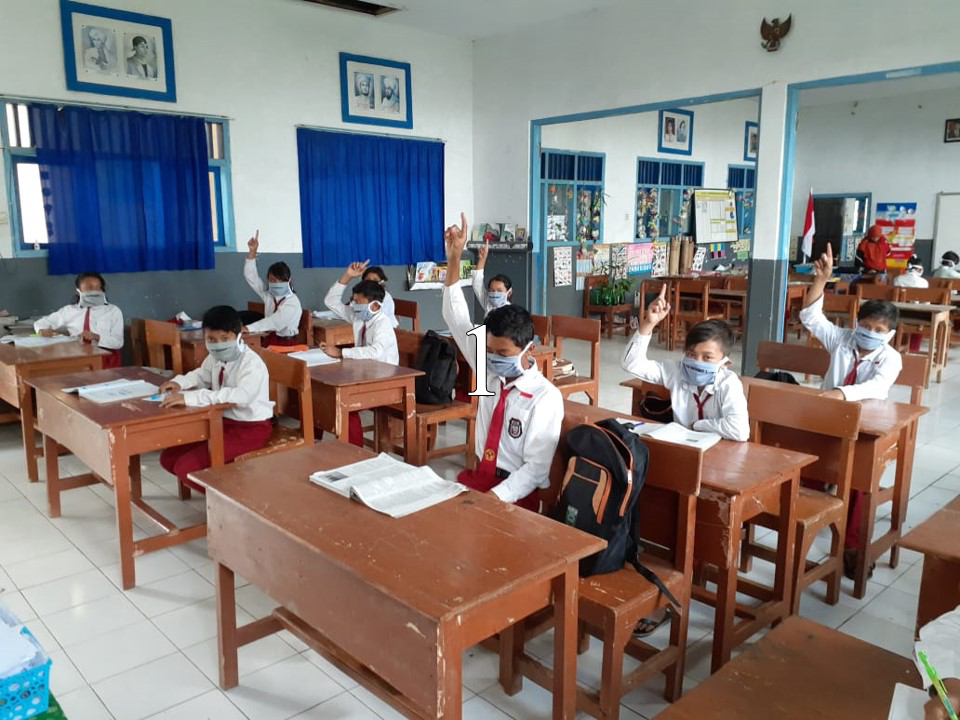
<style>
.page{position:relative;width:960px;height:720px}
.page>*{position:absolute;margin:0}
.t1{font:104.3px "TimesNewRomanPSMT";color:#ffffff}
</style>
<div class="page">
<p class="t1" style="left:467px;top:325px;width:28px;height:70px">1</p>
</div>
